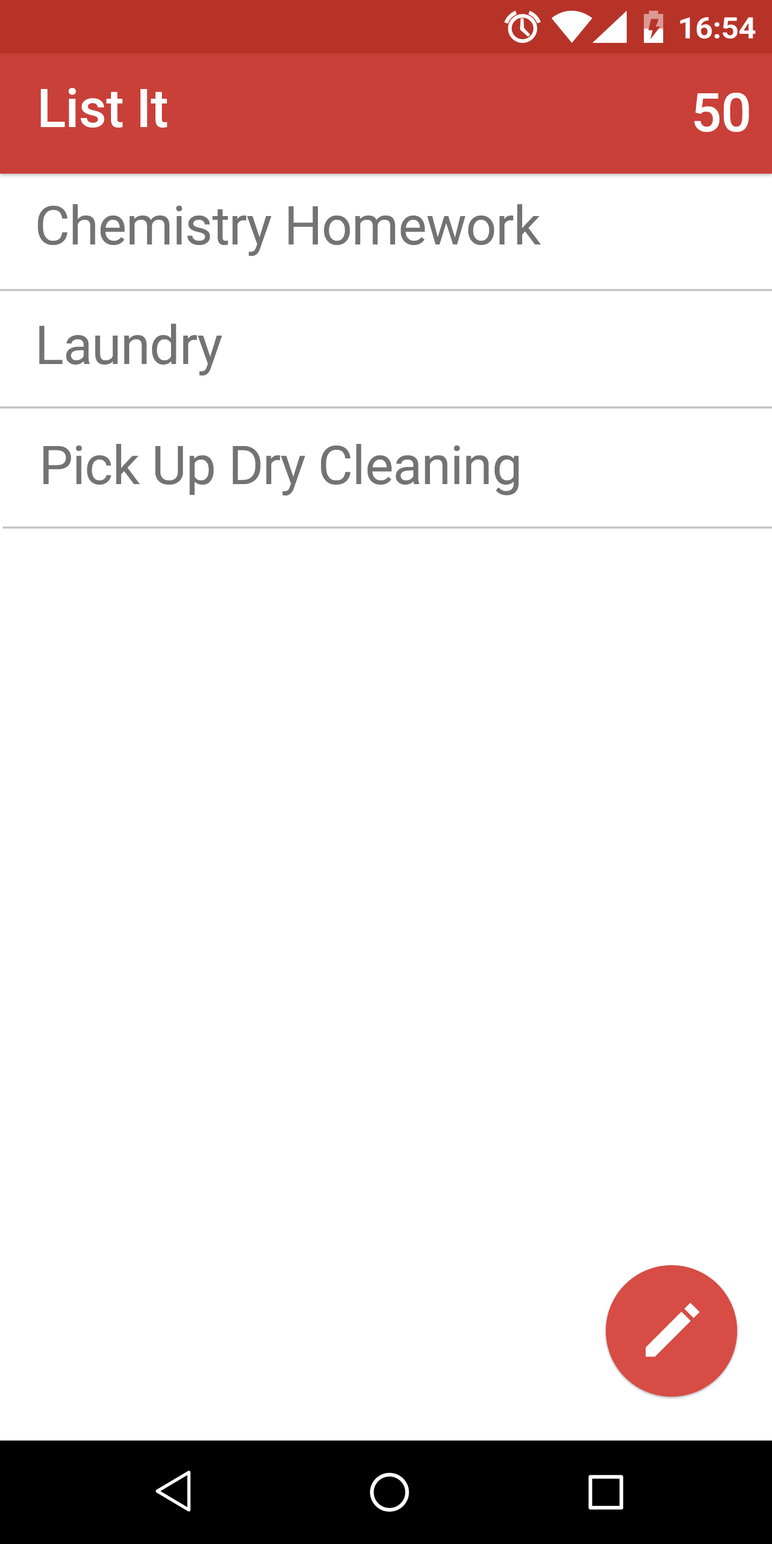
<style>
.page{position:relative;width:772px;height:1544px;background:#ffffff}
.page>*{position:absolute;margin:0}
.t1{font:53.6px "Roboto-Medium";letter-spacing:-0.01em;color:#ffffff}
.t2{font:53.7px "Roboto-Regular";letter-spacing:-0.01em;color:#737373}
.t3{font:53.6px "Roboto-Regular";letter-spacing:-0.01em;color:#737373}
</style>
<div class="page">
<p class="t1" style="left:41px;top:88px;width:126px;height:40px">List It</p>
<p class="t1" style="left:694px;top:93px;width:55px;height:39px">50</p>
<p class="t2" style="left:38px;top:204px;width:503px;height:52px">Chemistry Homework</p>
<p class="t2" style="left:39px;top:323px;width:184px;height:53px">Laundry</p>
<p class="t3" style="left:43px;top:444px;width:476px;height:52px">Pick Up Dry Cleaning</p>
</div>
